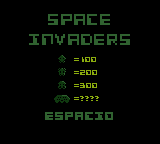
<style>
.page{position:relative;width:160px;height:144px;background:#000000}
.page>*{position:absolute;margin:0}
.t1{font:16.7px "CosmicAlien";color:#306230}
.t2{font:8.3px "CosmicAlien";color:#8cad0f}
.t3{font:12.5px "CosmicAlien";color:#306230}
</style>
<div class="page">
<p class="t1" style="left:29px;top:14px;width:101px;height:31px;text-align:center">space <br>invaders</p>
<p class="t2" style="left:74px;top:57px;width:22px;height:5px">=100</p>
<p class="t2" style="left:74px;top:70px;width:23px;height:5px">=200</p>
<p class="t2" style="left:74px;top:83px;width:23px;height:5px">=300</p>
<p class="t2" style="left:74px;top:96px;width:25px;height:5px">=????</p>
<p class="t3" style="left:45px;top:112px;width:68px;height:8px"><span class="t1"> </span>espacio</p>
</div>
